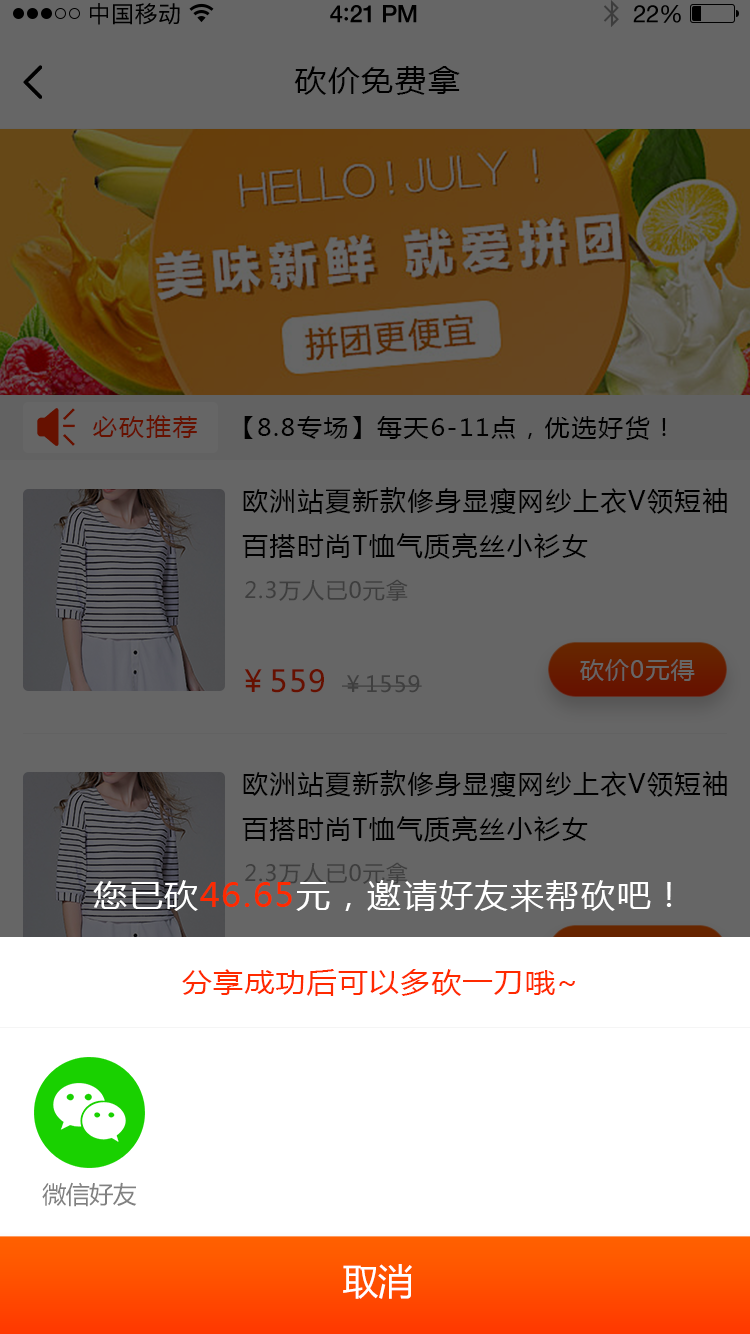
<style>
.page{position:relative;width:750px;height:1334px;background:#666666}
.page>*{position:absolute;margin:0}
.t1{font:23px "PingFangSC-Regular";letter-spacing:0.02em;color:#000000}
.t2{font:24px "HelveticaNeue-Medium";letter-spacing:-0.02em;color:#000000}
.t3{font:26px "Avenir-Medium";letter-spacing:-0.02em;color:#000000}
.t4{font:24px "HelveticaNeue";letter-spacing:-0.02em;color:#000000}
.t5{font:30px "MicrosoftYaHei";letter-spacing:0.05em;color:#000000;scale:1.06 1}
.t6{font:24px "MicrosoftYaHei";letter-spacing:0.05em;color:#661100;scale:1.06 1}
.t7{font:24px "MicrosoftYaHei";letter-spacing:0.05em;color:#000000;scale:1.06 1}
.t8{font:26px "MicrosoftYaHei";letter-spacing:0.06em;color:#000000;text-transform:uppercase}
.t9{font:22px "MicrosoftYaHei";letter-spacing:0.05em;color:#3e3e3e;text-transform:uppercase}
.t10{font:24px "MicrosoftYaHei";letter-spacing:0.05em;color:#666666;text-transform:uppercase}
.t11{font:30px "MicrosoftYaHei";letter-spacing:0.05em;color:#661100;text-transform:uppercase}
.t12{font:22px "MicrosoftYaHei";letter-spacing:0.05em;color:#3f3f3f;text-transform:uppercase}
.t13{font:32px "MicrosoftYaHei";letter-spacing:0.05em;color:#ffffff;scale:1.06 1}
.t14{font:32px "MicrosoftYaHei";letter-spacing:0.05em;color:#ff2a00;scale:1.06 1}
.t15{font:28px "MicrosoftYaHei";letter-spacing:0.05em;color:#ff2a00;scale:1.06 1}
.t16{font:24px "MicrosoftYaHei";letter-spacing:-0.02em;color:#818181}
.t17{font:36px "MicrosoftYaHei";letter-spacing:-0.02em;color:#ffffff}
</style>
<div class="page">
<p class="t1" style="left:90px;top:3px;width:90px;height:22px">中国移动</p>
<p class="t2" style="left:330px;top:5px;width:87px;height:18px">4<span class="t3">:</span>21 PM</p>
<p class="t4" style="left:633px;top:5px;width:48px;height:18px">22%</p>
<p class="t5" style="left:294px;top:66px;width:166px;height:29px">砍价免费拿</p>
<p class="t6" style="left:93px;top:415px;width:104px;height:23px">必砍推荐</p>
<p class="t7" style="left:244px;top:416px;width:422px;height:24px">【8.8专场】每天6-11点，优选好货！</p>
<p class="t8" style="left:242px;top:487px;width:485px;height:72px">欧洲站夏新款修身显瘦网纱上衣v领短袖百搭时尚t恤气质亮丝小衫女</p>
<p class="t9" style="left:245px;top:579px;width:163px;height:22px">2.3万人已0元拿</p>
<p class="t10" style="left:580px;top:659px;width:115px;height:22px">砍价0元得</p>
<p class="t11" style="left:244px;top:669px;width:80px;height:24px">￥559</p>
<p class="t12" style="left:342px;top:675px;width:80px;height:18px">￥1559</p>
<p class="t8" style="left:242px;top:770px;width:485px;height:72px">欧洲站夏新款修身显瘦网纱上衣v领短袖百搭时尚t恤气质亮丝小衫女</p>
<p class="t9" style="left:245px;top:862px;width:163px;height:22px">2.3万人已0元拿</p>
<p class="t13" style="left:93px;top:880px;width:579px;height:32px">您已砍<span class="t14">46.65</span>元，邀请好友来帮砍吧！</p>
<p class="t15" style="left:182px;top:969px;width:393px;height:27px">分享成功后可以多砍一刀哦~</p>
<p class="t16" style="left:42px;top:1182px;width:95px;height:25px">微信好友</p>
<p class="t17" style="left:343px;top:1264px;width:69px;height:35px">取消</p>
</div>
